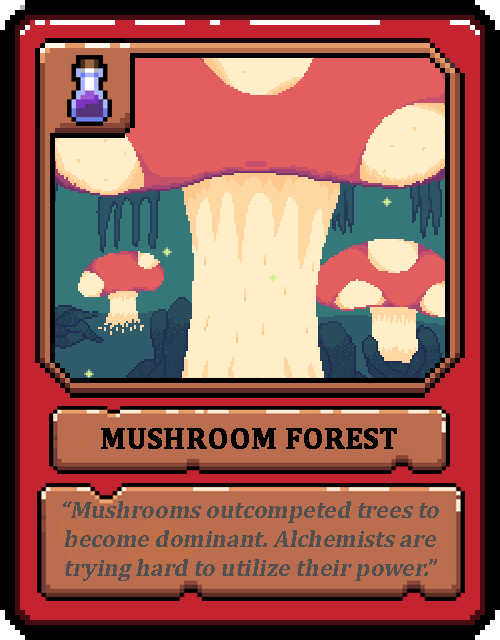
<style>
.page{position:relative;width:500px;height:640px}
.page>*{position:absolute;margin:0}
.t1{font:30px "Cambria-Bold";color:#000000;text-transform:uppercase;font-weight:bold}
.t2{font:24px "Cambria-Bold";color:#505050;font-style:italic}
</style>
<div class="page">
<p class="t1" style="left:101px;top:428px;width:296px;height:21px">Mushroom Forest</p>
<p class="t2" style="left:63px;top:501px;width:376px;height:80px;text-align:center">“Mushrooms outcompeted trees to become dominant. Alchemists are trying hard to utilize their power.”</p>
</div>
